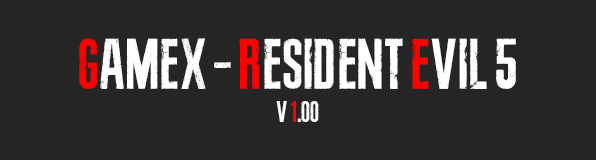
<style>
.page{position:relative;width:596px;height:160px;background:#252526}
.page>*{position:absolute;margin:0}
.t1{font:72px "ResidentEvil3RemakeFont";color:#ffffff}
.t2{font:72px "ResidentEvil3RemakeFont";color:#ff0000}
.t3{font:30px "ResidentEvil3RemakeFont";color:#ffffff}
.t4{font:30px "ResidentEvil3RemakeFont";color:#ff0000}
</style>
<div class="page">
<p class="t1" style="left:79px;top:38px;width:437px;height:51px"><span class="t2">G</span>amex - <span class="t2">R</span>esident <span class="t2">e</span>vil 5</p>
<p class="t3" style="left:276px;top:101px;width:43px;height:21px">v <span class="t4">1</span>.00</p>
</div>
